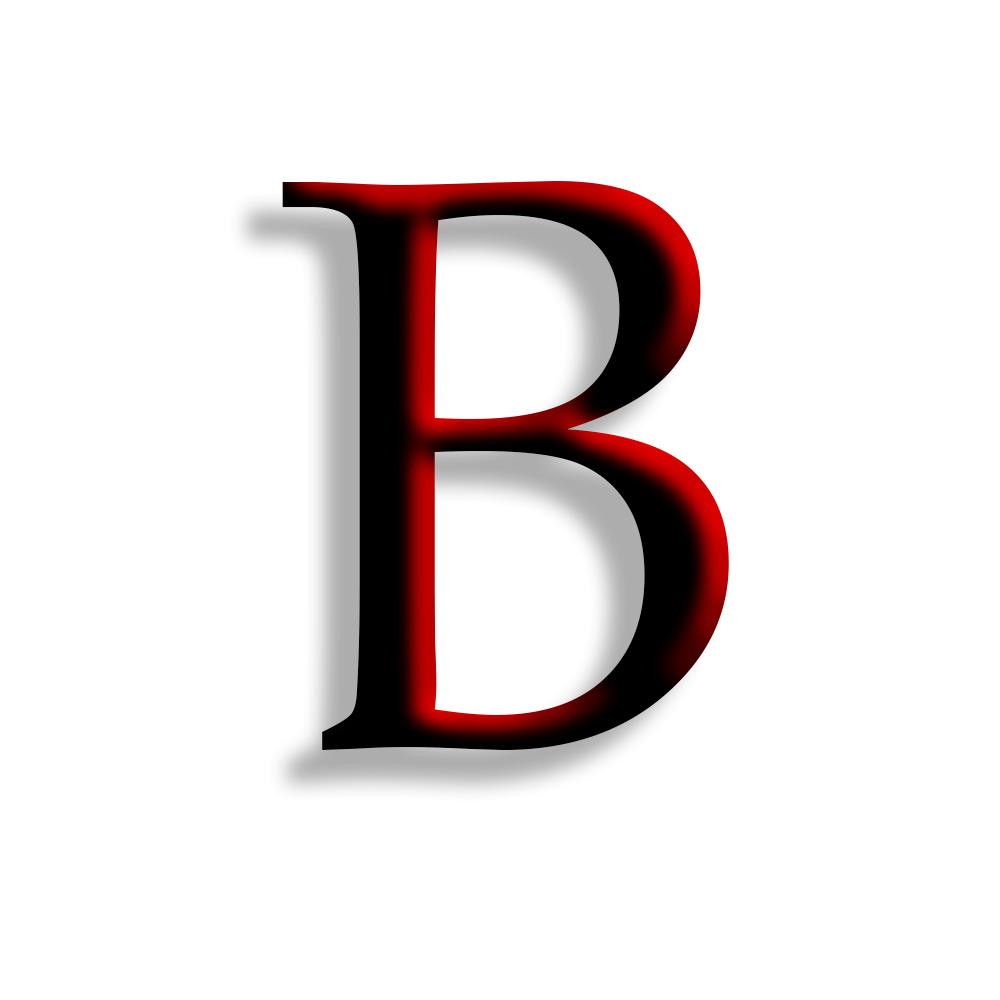
<style>
.page{position:relative;width:1000px;height:1000px;background:#ffffff}
.page>*{position:absolute;margin:0}
.t1{font:817px "BookAntiqua"}
</style>
<div class="page">
<p class="t1" style="left:282px;top:181px;width:447px;height:569px">B</p>
</div>
